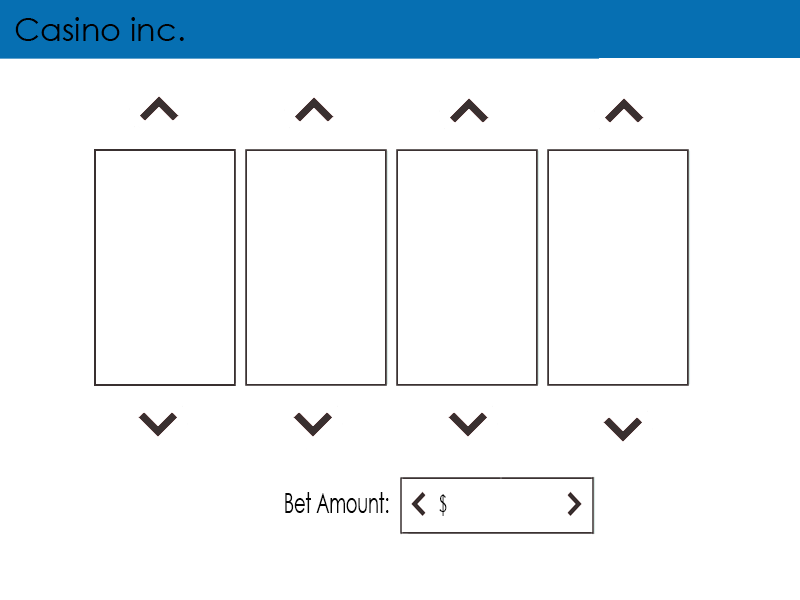
<style>
.page{position:relative;width:800px;height:600px;background:#ffffff}
.page>*{position:absolute;margin:0}
.t1{font:32px "CenturyGothic";color:#010101}
.t2{font:27.9px "CenturyGothic";color:#030303;scale:0.63 1}
.t3{font:23.2px "CenturyGothic";color:#030303;scale:0.59 1}
</style>
<div class="page">
<p class="t1" style="left:15px;top:17px;width:169px;height:24px">Casino inc.</p>
<p class="t2" style="left:285px;top:492px;width:104px;height:21px">Bet Amount:</p>
<p class="t3" style="left:439px;top:494px;width:8px;height:22px">$</p>
</div>
